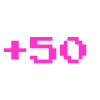
<style>
.page{position:relative;width:100px;height:100px;background:#ffffff}
.page>*{position:absolute;margin:0}
.t1{font:30px "PressStart2P";color:#ff33c9}
</style>
<div class="page">
<p class="t1" style="left:3px;top:37px;width:84px;height:27px">+50</p>
</div>
